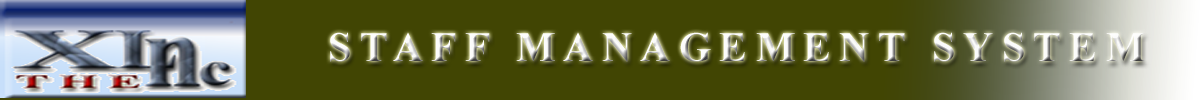
<style>
.page{position:relative;width:1200px;height:100px;background:#414503}
.page>*{position:absolute;margin:0}
.t1{font:41.7px "TimesNewRomanPS-BoldMT";letter-spacing:0.2em}
</style>
<div class="page">
<p class="t1" style="left:330px;top:32px;width:815px;height:30px">STAFF MANAGEMENT SYSTEM</p>
</div>
